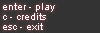
<style>
.page{position:relative;width:100px;height:33px;background:#333333}
.page>*{position:absolute;margin:0}
.t1{font:10px "ArialMT";color:#ffffff}
</style>
<div class="page">
<p class="t1" style="left:3px;top:3px;width:52px;height:9px">enter - play</p>
<p class="t1" style="left:3px;top:13px;width:43px;height:7px">c - credits</p>
<p class="t1" style="left:3px;top:23px;width:40px;height:7px">esc - exit</p>
</div>
